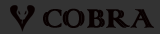
<style>
.page{position:relative;width:160px;height:34px;background:#333333}
.page>*{position:absolute;margin:0}
.t1{font:34.2px "ColonnaMT";color:#080000;font-weight:bold}
</style>
<div class="page">
<p class="t1" style="left:43px;top:8px;width:111px;height:20px">COBRA</p>
</div>
